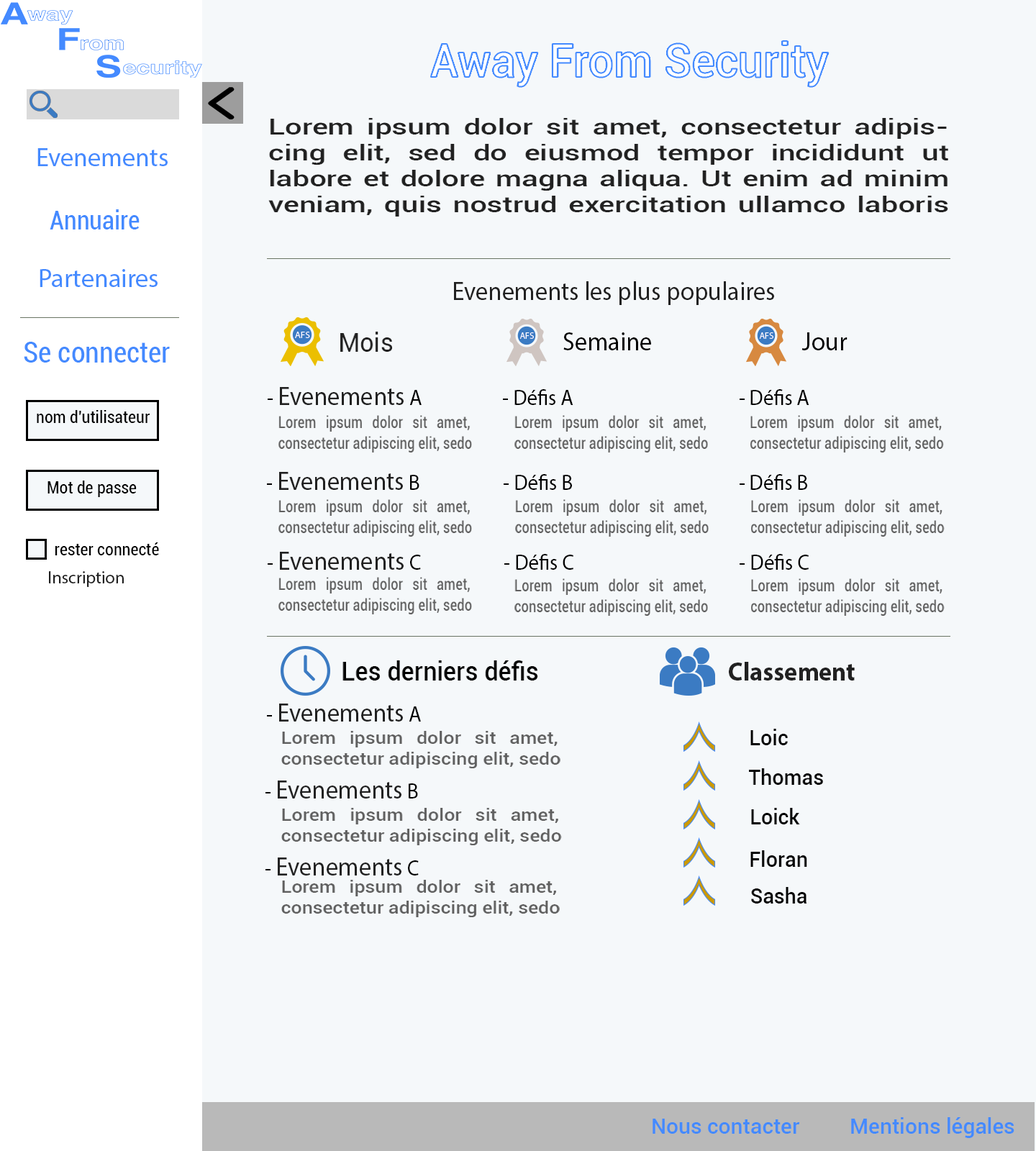
<style>
.page{position:relative;width:1036px;height:1151px;background:#f5f8fa}
.page>*{position:absolute;margin:0}
.t1{font:46.8px "Roboto-Medium";color:#ffffff;scale:0.96 1}
.t2{font:21.6px "Roboto-Medium";color:#212121;scale:1.39 1}
.t3{font:25.9px "MyriadPro-Regular";color:#448aff}
.t4{font:25.9px "Roboto-Condensed";color:#448aff}
.t5{font:25.9px "MyriadPro-Regular";color:#212121;scale:0.96 1}
.t6{font:28.8px "Roboto-Condensed";color:#448aff}
.t7{font:25.9px "Roboto-Regular";color:#212121;scale:0.96 1}
.t8{font:25.9px "MyriadPro-Regular";color:#010101;scale:0.96 1}
.t9{font:21.6px "MyriadPro-Regular";color:#000000;scale:0.96 1}
.t10{font:17.3px "Roboto-Condensed";color:#000000}
.t11{font:17.3px "Roboto-Medium";color:#5f5f5f;scale:0.78 1}
.t12{font:17.3px "MyriadPro-Regular";color:#212121}
.t13{font:25.9px "Roboto-Medium";color:#000000;scale:0.96 1}
.t14{font:25.9px "MyriadPro-Bold";color:#212121;scale:0.96 1}
.t15{font:17.3px "Roboto-Medium";color:#5f5f5f;scale:1.12 1}
.t16{font:21.6px "Roboto-Medium";color:#000000;scale:0.96 1}
.t17{font:17.3px "Roboto-Medium";color:#5f5f5f;scale:1.11 1}
.t18{font:21.6px "Roboto-Medium";color:#448aff}
</style>
<div class="page">
<p class="t1" style="left:431px;top:41px;width:398px;height:46px">Away From Security</p>
<p class="t2" style="left:268px;top:118px;width:680px;height:99px;text-align:justify">Lorem ipsum dolor sit amet, consectetur adipiscing elit, sed do eiusmod tempor incididunt ut labore et dolore magna aliqua. Ut enim ad minim veniam, quis nostrud exercitation ullamco laboris nisi ut aliquip ex ea.</p>
<p class="t3" style="left:37px;top:148px;width:131px;height:18px">Evenements</p>
<p class="t4" style="left:50px;top:209px;width:90px;height:20px">Annuaire</p>
<p class="t3" style="left:40px;top:269px;width:118px;height:18px">Partenaires</p>
<p class="t5" style="left:454px;top:281px;width:320px;height:24px">Evenements les plus populaires</p>
<p class="t6" style="left:24px;top:342px;width:146px;height:21px">Se connecter</p>
<p class="t7" style="left:340px;top:332px;width:52px;height:20px">Mois</p>
<p class="t8" style="left:563px;top:332px;width:88px;height:18px">Semaine</p>
<p class="t8" style="left:801px;top:332px;width:46px;height:18px">Jour</p>
<p class="t5" style="left:268px;top:387px;width:154px;height:18px"><span class="t9">- </span>Evenements<span class="t9"> A</span></p>
<p class="t9" style="left:503px;top:389px;width:70px;height:16px">- Défis A</p>
<p class="t9" style="left:740px;top:389px;width:69px;height:16px">- Défis A</p>
<p class="t10" style="left:37px;top:410px;width:113px;height:13px">nom d'utilisateur</p>
<p class="t11" style="left:278px;top:415px;width:194px;height:38px;text-align:justify">Lorem ipsum dolor sit amet, consectetur adipiscing elit, sedo</p>
<p class="t11" style="left:514px;top:415px;width:194px;height:38px;text-align:justify">Lorem ipsum dolor sit amet, consectetur adipiscing elit, sedo</p>
<p class="t11" style="left:750px;top:415px;width:194px;height:38px;text-align:justify">Lorem ipsum dolor sit amet, consectetur adipiscing elit, sedo</p>
<p class="t5" style="left:267px;top:472px;width:152px;height:18px"><span class="t9">- </span>Evenements<span class="t9"> B</span></p>
<p class="t10" style="left:47px;top:481px;width:90px;height:16px">Mot de passe</p>
<p class="t9" style="left:504px;top:474px;width:68px;height:16px">- Défis B</p>
<p class="t9" style="left:740px;top:474px;width:67px;height:16px">- Défis B</p>
<p class="t11" style="left:278px;top:499px;width:194px;height:38px;text-align:justify">Lorem ipsum dolor sit amet, consectetur adipiscing elit, sedo</p>
<p class="t11" style="left:515px;top:499px;width:194px;height:38px;text-align:justify">Lorem ipsum dolor sit amet, consectetur adipiscing elit, sedo</p>
<p class="t11" style="left:751px;top:499px;width:194px;height:38px;text-align:justify">Lorem ipsum dolor sit amet, consectetur adipiscing elit, sedo</p>
<p class="t10" style="left:55px;top:542px;width:104px;height:13px">rester connecté</p>
<p class="t5" style="left:268px;top:552px;width:153px;height:18px"><span class="t9">- </span>Evenements<span class="t9"> C</span></p>
<p class="t9" style="left:504px;top:554px;width:69px;height:16px">- Défis C</p>
<p class="t9" style="left:740px;top:554px;width:69px;height:16px">- Défis C</p>
<p class="t12" style="left:49px;top:571px;width:75px;height:16px">Inscription</p>
<p class="t11" style="left:278px;top:577px;width:194px;height:37px;text-align:justify">Lorem ipsum dolor sit amet, consectetur adipiscing elit, sedo</p>
<p class="t11" style="left:514px;top:578px;width:194px;height:38px;text-align:justify">Lorem ipsum dolor sit amet, consectetur adipiscing elit, sedo</p>
<p class="t11" style="left:751px;top:578px;width:194px;height:38px;text-align:justify">Lorem ipsum dolor sit amet, consectetur adipiscing elit, sedo</p>
<p class="t13" style="left:342px;top:660px;width:196px;height:21px">Les derniers défis</p>
<p class="t14" style="left:729px;top:662px;width:126px;height:19px">Classement</p>
<p class="t5" style="left:267px;top:704px;width:154px;height:18px"><span class="t9">- </span>Evenements<span class="t9"> A</span></p>
<p class="t15" style="left:281px;top:731px;width:279px;height:37px;text-align:justify">Lorem ipsum dolor sit amet, consectetur adipiscing elit, sedo</p>
<p class="t16" style="left:750px;top:729px;width:38px;height:16px">Loic</p>
<p class="t16" style="left:749px;top:768px;width:74px;height:17px">Thomas</p>
<p class="t5" style="left:265px;top:781px;width:153px;height:18px"><span class="t9">- </span>Evenements<span class="t9"> B</span></p>
<p class="t15" style="left:281px;top:808px;width:281px;height:37px;text-align:justify">Lorem ipsum dolor sit amet, consectetur adipiscing elit, sedo</p>
<p class="t16" style="left:751px;top:808px;width:49px;height:16px">Loick</p>
<p class="t5" style="left:265px;top:858px;width:154px;height:18px"><span class="t9">- </span>Evenements<span class="t9"> C</span></p>
<p class="t16" style="left:750px;top:850px;width:57px;height:17px">Floran</p>
<p class="t17" style="left:281px;top:880px;width:279px;height:37px;text-align:justify">Lorem ipsum dolor sit amet, consectetur adipiscing elit, sedo</p>
<p class="t16" style="left:751px;top:887px;width:55px;height:17px">Sasha</p>
<p class="t18" style="left:653px;top:1119px;width:147px;height:15px">Nous contacter</p>
<p class="t18" style="left:851px;top:1117px;width:163px;height:21px">Mentions légales</p>
</div>
